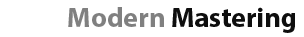
<style>
.page{position:relative;width:304px;height:37px;background:#ffffff}
.page>*{position:absolute;margin:0}
.t1{font:27.9px "MyriadPro-Bold";color:#0e0e0e}
.t2{font:27.9px "MyriadPro-Bold";color:#ffffff}
.t3{font:27.9px "MyriadPro-Bold";color:#808080}
</style>
<div class="page">
<p class="t1" style="left:9px;top:7px;width:286px;height:26px"><span class="t2">Post</span><span class="t3"> Modern </span>Mastering</p>
</div>
